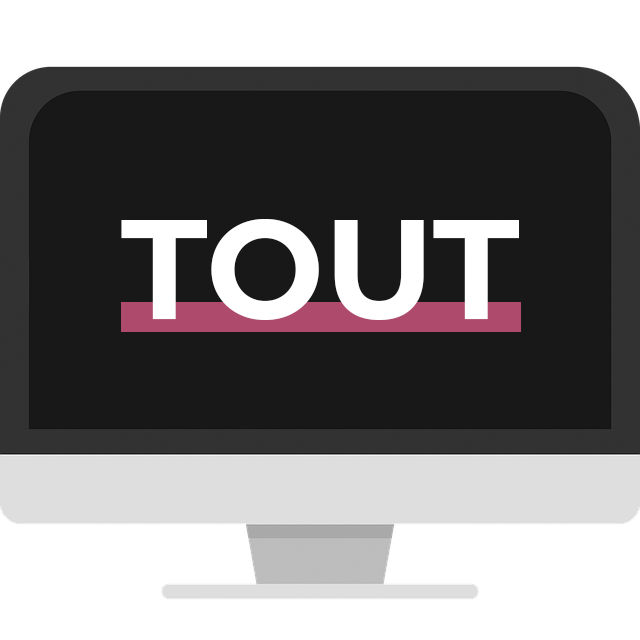
<style>
.page{position:relative;width:640px;height:640px;background:#181818}
.page>*{position:absolute;margin:0}
.t1{font:140px "Montserrat-Bold";color:#ffffff;text-transform:uppercase}
</style>
<div class="page">
<p class="t1" style="left:121px;top:219px;width:398px;height:101px">TOUT</p>
</div>
